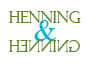
<style>
.page{position:relative;width:90px;height:70px;background:#ffffff}
.page>*{position:absolute;margin:0}
.t1{font:15.7px "FelixTitlingMT";color:#5f8222;scale:0.96 1}
.t2{font:31.6px "TimesNewRomanPSMT";color:#00b3db;scale:0.96 1}
.t3{font:15.8px "FelixTitlingMT";color:#5f8222;scale:0.96 1}
</style>
<div class="page">
<p class="t1" style="left:9px;top:11px;width:72px;height:12px">Henning</p>
<p class="t2" style="left:34px;top:20px;width:22px;height:21px">&amp;</p>
<p class="t3" style="left:9px;top:40px;width:71px;height:12px;rotate:180deg">gninneh</p>
</div>
